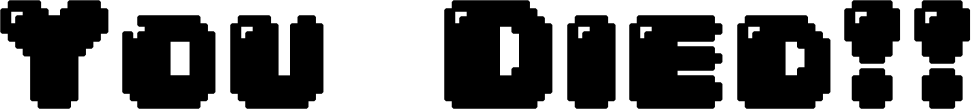
<style>
.page{position:relative;width:971px;height:109px;background:#000000}
.page>*{position:absolute;margin:0}
.t1{font:127px "04b30";letter-spacing:-0.005em;color:#000000;font-weight:bold}
</style>
<div class="page">
<p class="t1" style="left:0px;top:0px;width:971px;height:109px">You Died!!</p>
</div>
